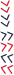
<style>
.page{position:relative;width:14px;height:75px;background:#ffffff}
.page>*{position:absolute;margin:0}
.t1{font:16px "ThrowMyHandsUpintheAir";color:#d62134;text-transform:uppercase}
.t2{font:16px "ThrowMyHandsUpintheAir";color:#2c3045;text-transform:uppercase}
</style>
<div class="page">
<p class="t1" style="left:0px;top:0px;width:10px;height:13px;rotate:90deg">&gt;&gt;</p>
<p class="t2" style="left:0px;top:14px;width:10px;height:13px;rotate:90deg">&gt;&gt;</p>
<p class="t2" style="left:0px;top:31px;width:14px;height:10px">&gt;&gt;</p>
<p class="t2" style="left:0px;top:54px;width:14px;height:9px;rotate:-180deg">&gt;&gt;</p>
<p class="t1" style="left:0px;top:42px;width:14px;height:10px">&gt;&gt;</p>
<p class="t1" style="left:0px;top:65px;width:14px;height:9px;rotate:-180deg">&gt;&gt;</p>
</div>
